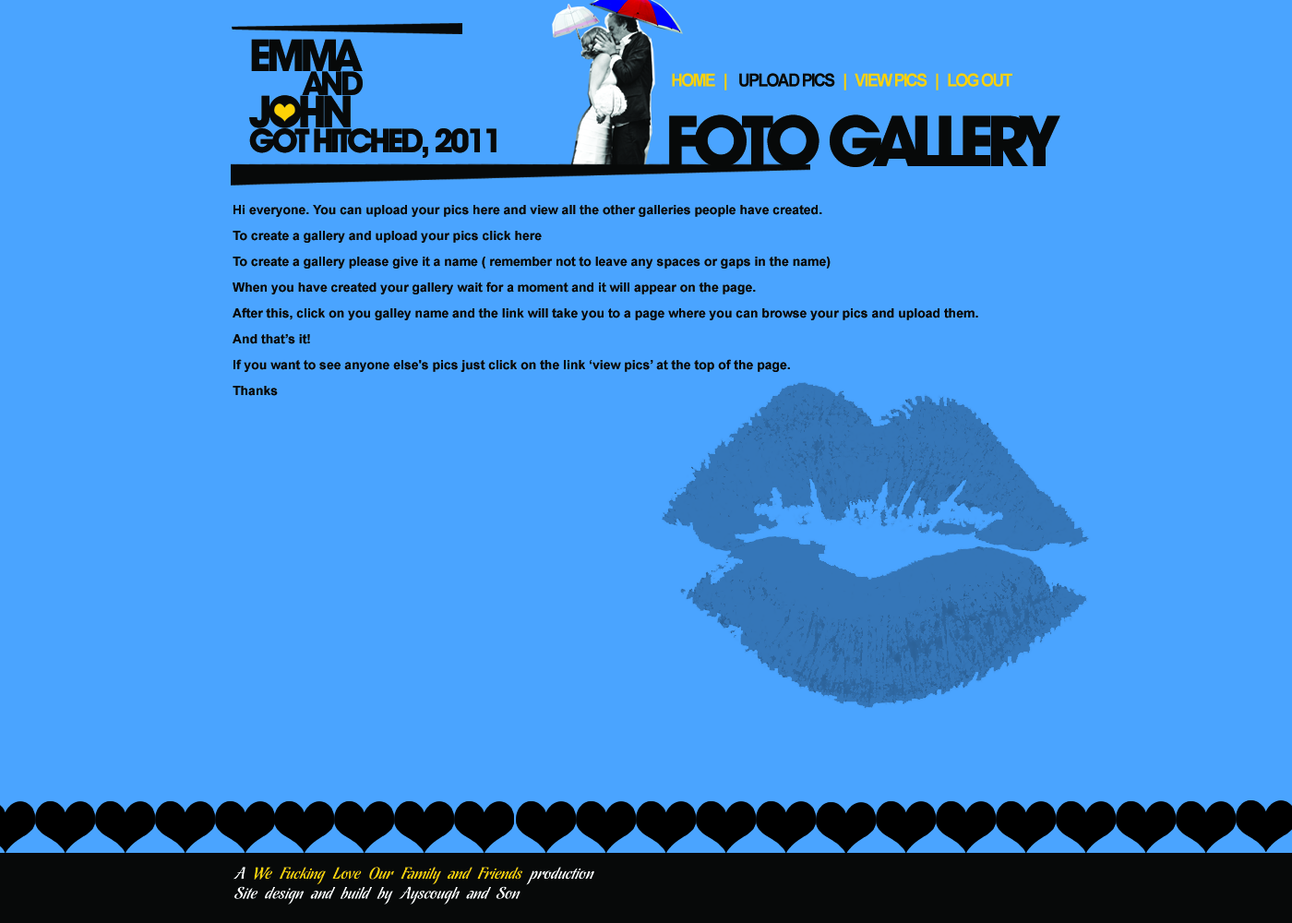
<style>
.page{position:relative;width:1292px;height:923px;background:#4aa4ff}
.page>*{position:absolute;margin:0}
.t1{font:44.3px "AvantGardeITCbyBT-Bold";letter-spacing:-0.1em;color:#070909}
.t2{font:33.2px "AvantGardeITCbyBT-Bold";letter-spacing:-0.1em;color:#070909}
.t3{font:17.8px "Arial-BoldMT";letter-spacing:-0.1em;color:#fcd206;scale:0.94 1}
.t4{font:17.8px "Arial-BoldMT";letter-spacing:-0.1em;color:#070909;scale:0.94 1}
.t5{font:70.6px "AvantGardeITCbyBT-Bold";letter-spacing:-0.1em;color:#070909}
.t6{font:12.9px/12.9px "Arial-BoldMT";color:#070809}
.t7{font:16.6px "Chocolate";color:#ffffff}
.t8{font:16.6px "Chocolate";color:#fcd206}
</style>
<div class="page">
<p class="t1" style="left:251px;top:39px;width:112px;height:32px">EMMA</p>
<p class="t2" style="left:302px;top:71px;width:61px;height:24px">AND</p>
<p class="t3" style="left:672px;top:73px;width:340px;height:17px">HOME   |    <span class="t4">UPLOAD PICS</span>   |   VIEW PICS   |   LOG OUT</p>
<p class="t1" style="left:249px;top:95px;width:102px;height:33px">JOHN</p>
<p class="t5" style="left:669px;top:114px;width:391px;height:53px">FOTO GALLERY</p>
<p class="t2" style="left:249px;top:128px;width:248px;height:30px">GOT HITCHED, 2011</p>
<p class="t6" style="left:233px;top:205px;width:745px;height:191px">Hi everyone. You can upload your pics here and view all the other galleries people have created.<br><br>To create a gallery and upload your pics click here<br><br>To create a gallery please give it a name ( remember not to leave any spaces or gaps in the name)<br><br>When you have created your gallery wait for a moment and it will appear on the page.<br><br>After this, click on you galley name and the link will take you to a page where you can browse your pics and upload them.<br><br>And that’s it!<br><br>If you want to see anyone else's pics just click on the link ‘view pics’ at the top of the page. <br><br>Thanks</p>
<p class="t7" style="left:233px;top:867px;width:361px;height:37px">A <span class="t8">We Fucking Love Our Family and Friends</span> production.,<br>Site design and build by Ayscough and Son</p>
</div>
